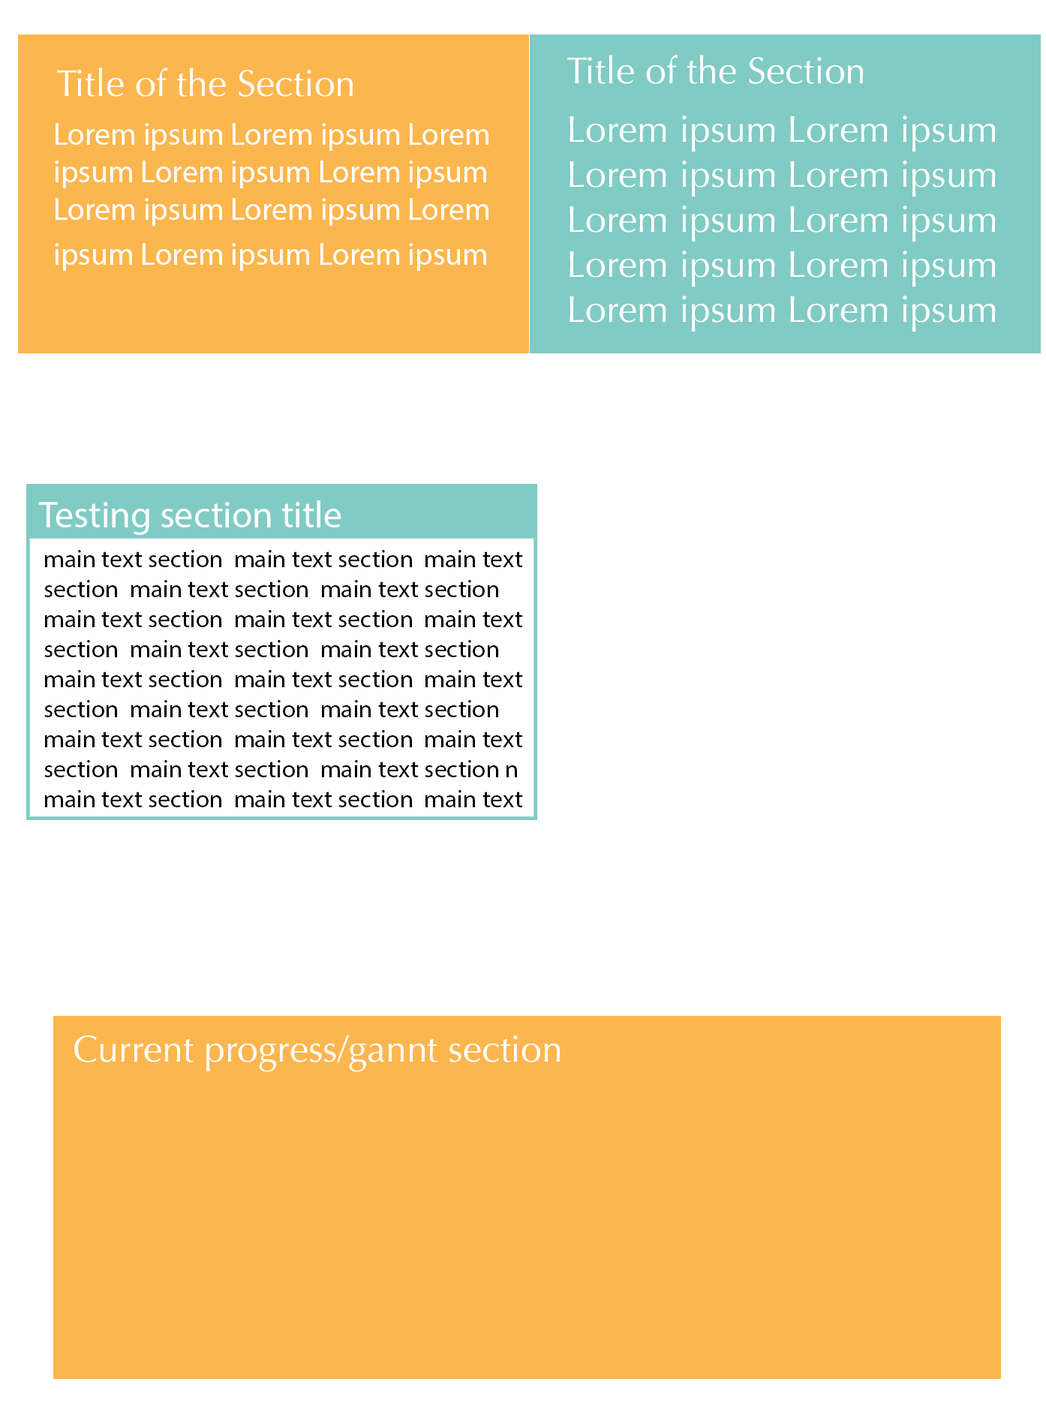
<style>
.page{position:relative;width:1046px;height:1418px;background:#ffffff}
.page>*{position:absolute;margin:0}
.t1{font:9px "Optima-Regular";color:#ffffff}
.t2{font:31.2px "MyriadPro-Regular";color:#ffffff}
.t3{font:9px "MyriadPro-Regular";color:#ffffff}
.t4{font:25px "MyriadPro-Regular";color:#000000}
</style>
<div class="page">
<p class="t1" style="left:567px;top:55px;width:295px;height:29px">Title of the Section</p>
<p class="t1" style="left:57px;top:68px;width:295px;height:29px">Title of the Section</p>
<p class="t2" style="left:55px;top:123px;width:433px;height:148px">Lorem ipsum Lorem ipsum Lorem ipsum Lorem ipsum Lorem ipsum Lorem ipsum Lorem ipsum Lorem ipsum Lorem ipsum Lorem ipsum</p>
<p class="t1" style="left:569px;top:116px;width:426px;height:216px">Lorem ipsum Lorem ipsum Lorem ipsum Lorem ipsum Lorem ipsum Lorem ipsum Lorem ipsum Lorem ipsum Lorem ipsum Lorem ipsum</p>
<p class="t3" style="left:38px;top:500px;width:303px;height:35px">Testing section title</p>
<p class="t4" style="left:44px;top:550px;width:479px;height:257px">main text section  main text section  main text section  main text section  main text section  main text section  main text section  main text section  main text section  main text section main text section  main text section  main text section  main text section  main text section  main text section  main text section  main text section  main text section  main text section n  main text section  main text section  main text section</p>
<p class="t1" style="left:74px;top:1034px;width:486px;height:38px">Current progress/gannt section</p>
</div>
